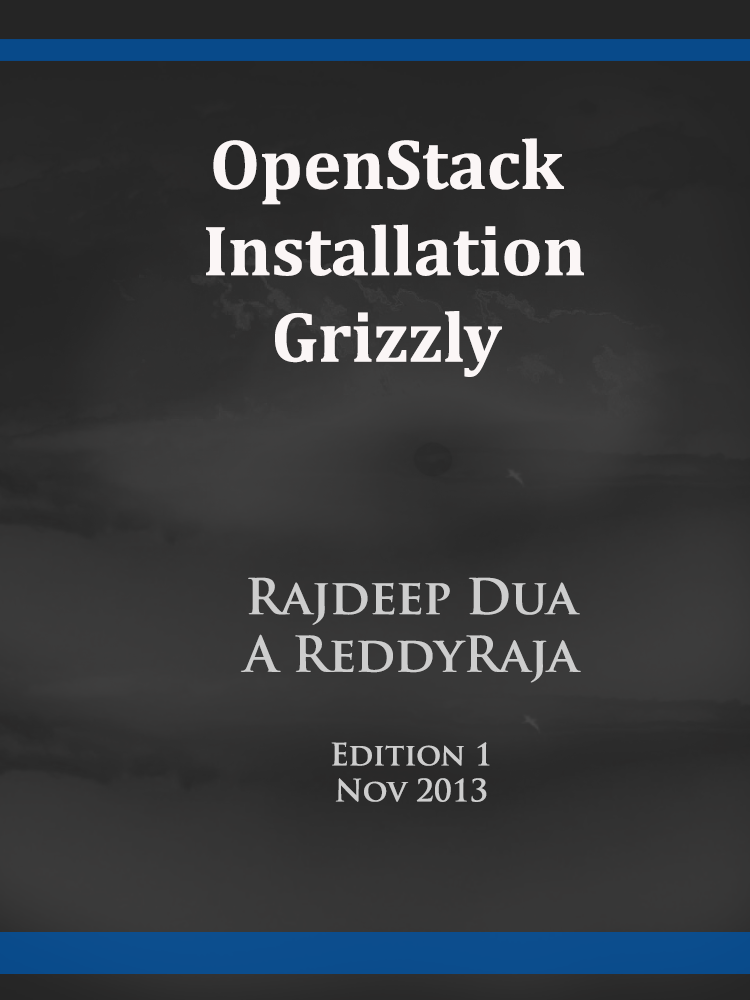
<style>
.page{position:relative;width:750px;height:1000px}
.page>*{position:absolute;margin:0}
.t1{font:71.9px "Cambria-Bold";color:#fbf6f6}
.t2{font:48px "TrajanPro-Bold";color:#cdcdcd}
.t3{font:30px "TrajanPro-Bold";color:#cdcdcd}
</style>
<div class="page">
<p class="t1" style="left:206px;top:138px;width:378px;height:239px;text-align:center">OpenStack<br> Installation<br>Grizzly</p>
<p class="t2" style="left:240px;top:577px;width:341px;height:225px;text-align:center">Rajdeep Dua<br>A ReddyRaja<br><br><span class="t3">Edition 1<br>Nov 2013</span></p>
</div>
